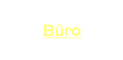
<style>
.page{position:relative;width:123px;height:60px;background:#ffffff}
.page>*{position:absolute;margin:0}
.t1{font:16px "AeroRegularSWFTE";color:#fffe7e;text-decoration:underline}
</style>
<div class="page">
<p class="t1" style="left:42px;top:24px;width:40px;height:15px">Büro</p>
</div>
